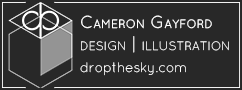
<style>
.page{position:relative;width:242px;height:90px;background:#282828}
.page>*{position:absolute;margin:0}
.t1{font:17.2px "Quicksand-Light";color:#ffffff;font-variant:small-caps}
.t2{font:17.2px "Quicksand-Regular";color:#ffffff;font-variant:small-caps}
.t3{font:13.4px "Quicksand-Light";color:#ffffff}
</style>
<div class="page">
<p class="t1" style="left:80px;top:15px;width:149px;height:61px"><span class="t2">Cameron Gayford<br></span>design | illustration<br><span class="t3">dropthesky.com</span></p>
</div>
